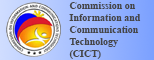
<style>
.page{position:relative;width:154px;height:60px}
.page>*{position:absolute;margin:0}
.t1{font:10px "TimesNewRomanPS-BoldMT";color:#454545}
</style>
<div class="page">
<p class="t1" style="left:69px;top:2px;width:72px;height:57px;text-align:right">Commission on <br>Information and <br>Communication <br>Technology <br> (CICT)</p>
</div>
